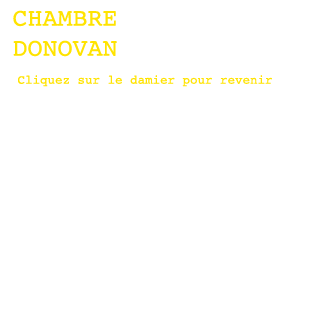
<style>
.page{position:relative;width:320px;height:320px;background:#ffffff}
.page>*{position:absolute;margin:0}
.t1{font:25px "Courier";color:#ffe300}
.t2{font:12.5px "Courier";color:#ffe300}
</style>
<div class="page">
<p class="t1" style="left:13px;top:10px;width:104px;height:47px;text-align:center">CHAMBRE <br>DONOVAN</p>
<p class="t2" style="left:18px;top:75px;width:254px;height:12px">Cliquez sur le damier pour revenir</p>
</div>
